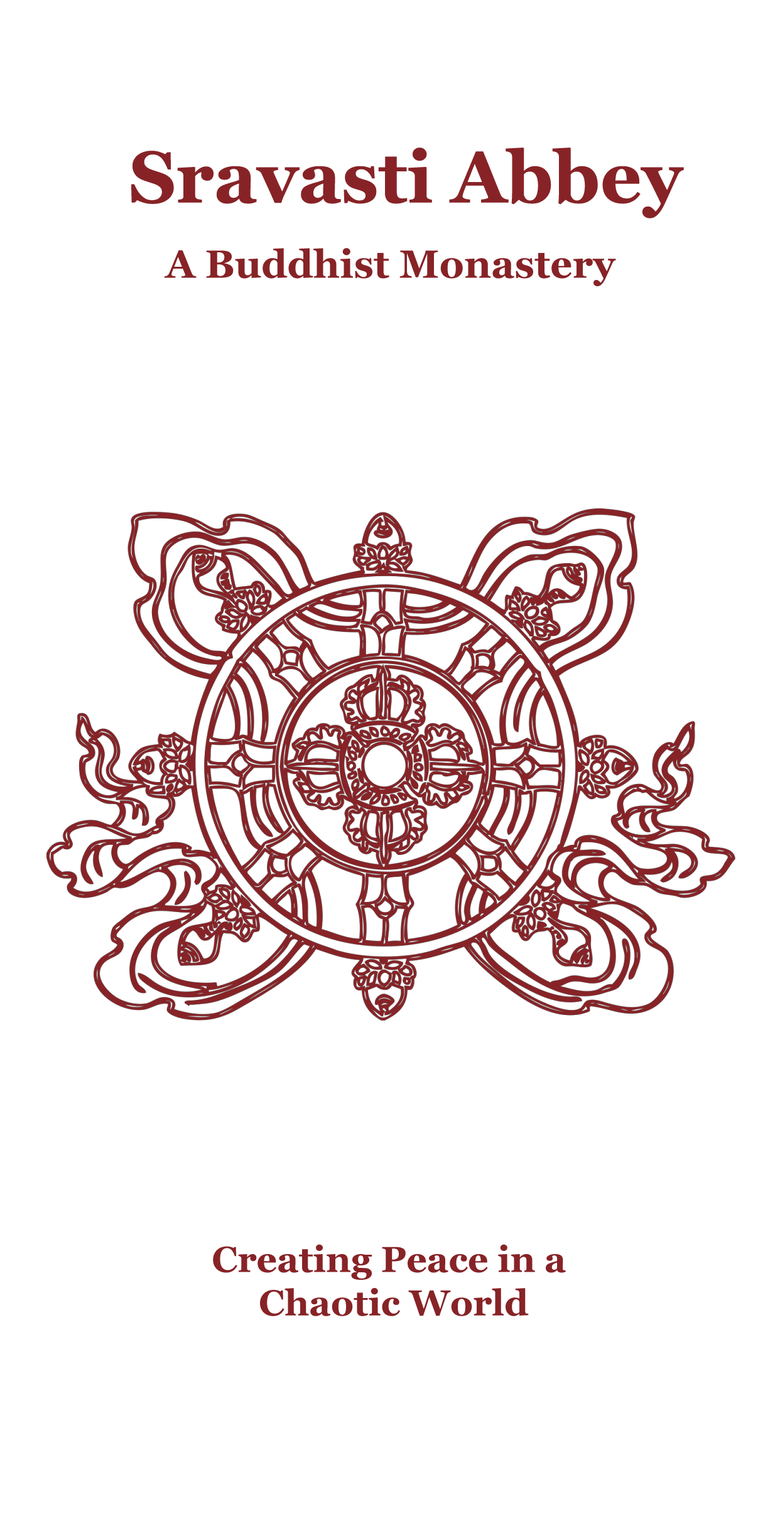
<style>
.page{position:relative;width:780px;height:1529px;background:#ffffff}
.page>*{position:absolute;margin:0}
.t1{font:72.5px "Georgia-Bold";color:#872327}
.t2{font:39.1px "Georgia-Bold";color:#872327}
.t3{font:36.2px "Georgia-Bold";color:#872327}
</style>
<div class="page">
<p class="t1" style="left:131px;top:148px;width:553px;height:70px">Sravasti Abbey</p>
<p class="t2" style="left:164px;top:248px;width:452px;height:38px">A Buddhist Monastery</p>
<p class="t3" style="left:213px;top:1244px;width:353px;height:72px;text-align:center">Creating Peace in a <br>Chaotic World</p>
</div>
